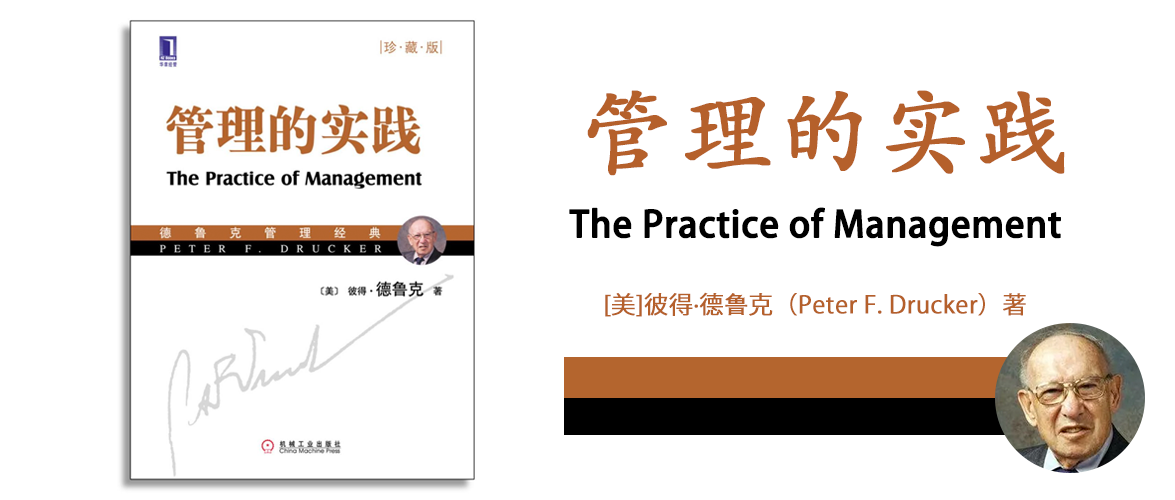
<style>
.page{position:relative;width:1175px;height:500px;background:#ffffff}
.page>*{position:absolute;margin:0}
.t1{font:96px "STKaiti";color:#b5602b;font-weight:bold}
.t2{font:36px "AdobeHeitiStd-Regular";color:#000000;font-weight:bold}
.t3{font:24px "KozGoPr6N-Regular";color:#b5602b;font-weight:bold}
.t4{font:24px "AdobeHeitiStd-Regular";color:#b5602b;font-weight:bold}
</style>
<div class="page">
<p class="t1" style="left:587px;top:90px;width:478px;height:86px">管理的实践</p>
<p class="t2" style="left:569px;top:207px;width:492px;height:40px">The Practice of Management</p>
<p class="t3" style="left:605px;top:292px;width:421px;height:25px">[美]彼得·德<span class="t4">鲁</span>克（Peter F. Drucker）著</p>
</div>
